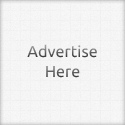
<style>
.page{position:relative;width:125px;height:125px}
.page>*{position:absolute;margin:0}
.t1{font:16px "Ubuntu-Regular"}
.t2{font:16px "Ubuntu-Regular";color:#666666}
</style>
<div class="page">
<p class="t1" style="left:27px;top:44px;width:70px;height:14px">Advertise</p>
<p class="t2" style="left:46px;top:66px;width:34px;height:12px">Here</p>
</div>
